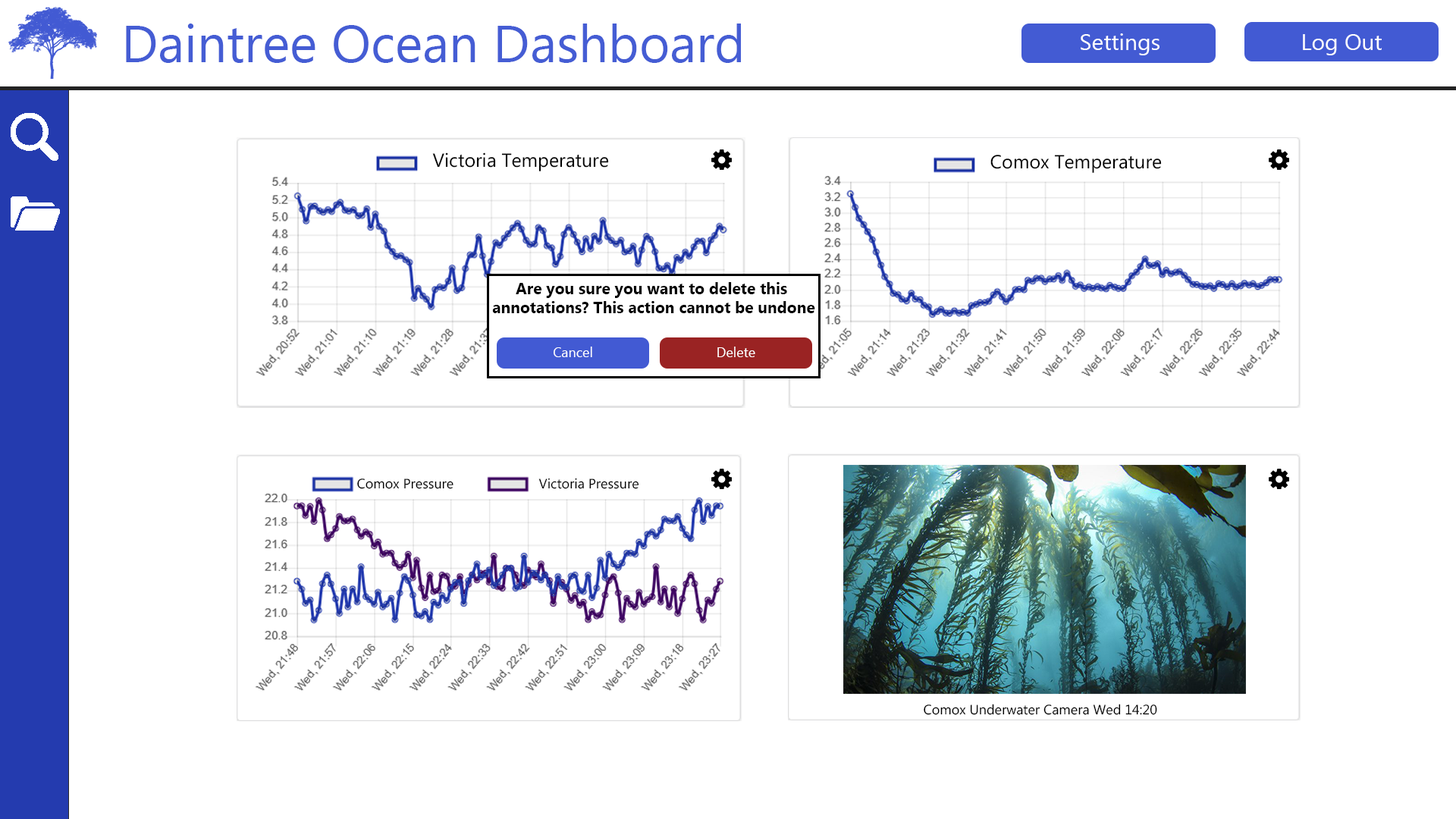
<style>
.page{position:relative;width:1456px;height:819px;background:#ffffff}
.page>*{position:absolute;margin:0}
.t1{font:52.3px "MyanmarText";color:#455dd4}
.t2{font:22.7px "MyanmarText";color:#ffffff}
.t3{font:19px "MyanmarText";color:#000000}
.t4{font:16px "MyanmarText-Bold";color:#000000}
.t5{font:13.7px "MyanmarText";color:#ffffff}
.t6{font:13.6px "MyanmarText";color:#000000}
</style>
<div class="page">
<p class="t1" style="left:126px;top:24px;width:615px;height:39px">Daintree Ocean Dashboard</p>
<p class="t2" style="left:1081px;top:33px;width:78px;height:22px">Settings</p>
<p class="t2" style="left:1303px;top:34px;width:79px;height:21px">Log Out</p>
<p class="t3" style="left:432px;top:152px;width:177px;height:19px">Victoria Temperature</p>
<p class="t3" style="left:990px;top:155px;width:172px;height:18px">Comox Temperature</p>
<p class="t4" style="left:492px;top:282px;width:323px;height:31px;text-align:center">Are you sure you want to delete this <br>annotations? This action cannot be undone</p>
<p class="t5" style="left:554px;top:347px;width:38px;height:10px">Cancel</p>
<p class="t5" style="left:717px;top:347px;width:38px;height:10px">Delete</p>
<p class="t6" style="left:357px;top:479px;width:96px;height:10px">Comox Pressure</p>
<p class="t6" style="left:538px;top:478px;width:101px;height:11px">Victoria Pressure</p>
<p class="t6" style="left:924px;top:704px;width:233px;height:11px">Comox Underwater Camera Wed 14:20</p>
</div>
